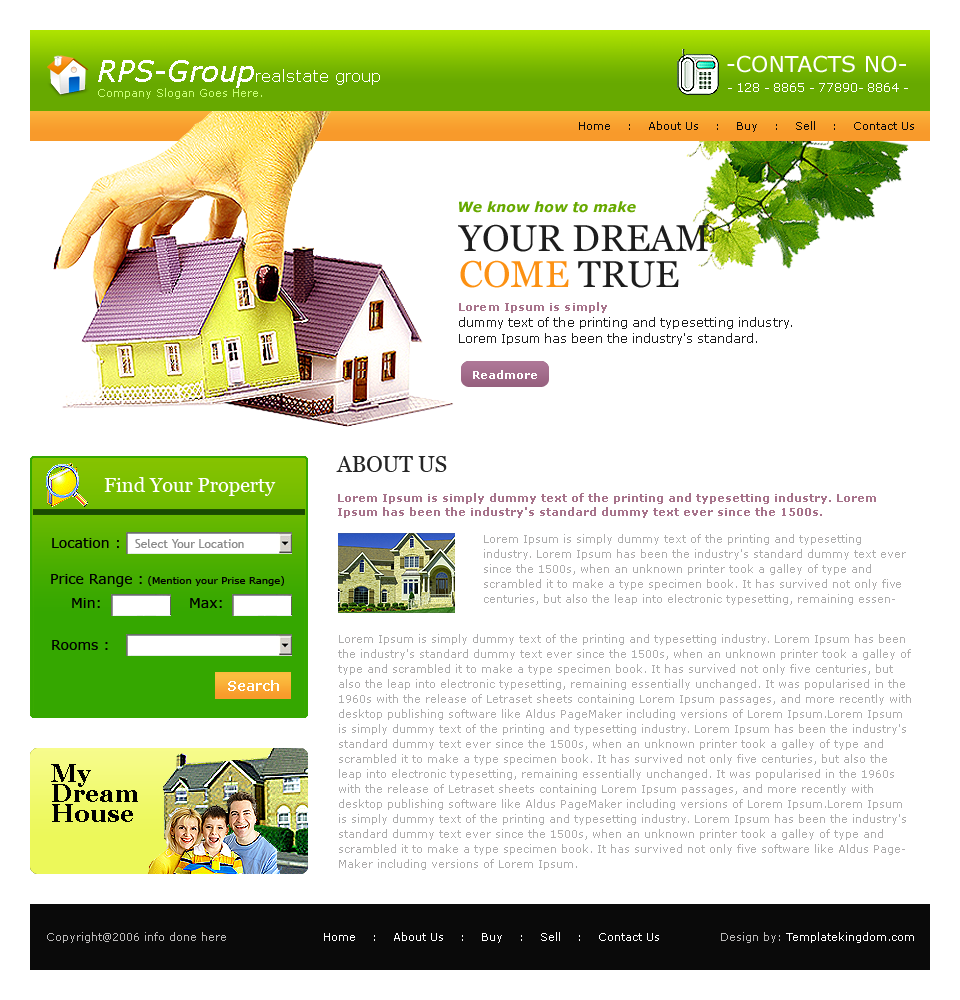
<style>
.page{position:relative;width:960px;height:1000px;background:#ffffff}
.page>*{position:absolute;margin:0}
.t1{font:16px "Verdana";color:#ffffff}
.t2{font:29px "Verdana-Italic";color:#ffffff}
.t3{font:22px "Verdana";color:#ffffff}
.t4{font:11px "Verdana";color:#caff77}
.t5{font:12px "Verdana";color:#ffffff}
.t6{font:11px "Verdana";color:#0a0a0a}
.t7{font:14px "Verdana-BoldItalic";color:#67a900}
.t8{font:37px/36px "Georgia";color:#1d1d1d}
.t9{font:37px/36px "Georgia";color:#fc9113}
.t10{font:12px/16px "Verdana";color:#1d1d1d}
.t11{font:11px/16px "Verdana-Bold";color:#a7738b}
.t12{font:11px "Verdana-Bold";color:#ffffff}
.t13{font:22px "Georgia";color:#252525;text-transform:uppercase}
.t14{font:20px "Georgia";color:#ffffff}
.t15{font:11px/14px "Verdana-Bold";color:#a7738b}
.t16{font:11px/15px "Verdana";color:#adacac}
.t17{font:14px "Verdana";color:#000000}
.t18{font:12px "TrebuchetMS";color:#8b8b8b}
.t19{font:10px "Verdana";color:#000000}
.t20{font:14px "Verdana-Bold";color:#ffffff}
.t21{font:25px/20px "Georgia-Bold";color:#000000}
.t22{font:11px "Verdana";color:#bab9b9}
.t23{font:11px "Verdana";color:#ffffff}
</style>
<div class="page">
<p class="t1" style="left:98px;top:60px;width:282px;height:28px"><span class="t2">RPS-Group</span>realstate group</p>
<p class="t3" style="left:727px;top:55px;width:179px;height:18px">-CONTACTS NO-</p>
<p class="t4" style="left:98px;top:88px;width:164px;height:11px">Company Slogan Goes Here.</p>
<p class="t5" style="left:728px;top:83px;width:180px;height:9px">- 128 - 8865 - 77890- 8864 -</p>
<p class="t6" style="left:579px;top:121px;width:335px;height:11px">Home    :    About Us    :    Buy    :    Sell    :    Contact Us</p>
<p class="t7" style="left:459px;top:201px;width:177px;height:12px">We know how to make</p>
<p class="t8" style="left:458px;top:224px;width:250px;height:64px">YOUR DREAM<br><span class="t9">COME</span> TRUE</p>
<p class="t10" style="left:459px;top:302px;width:333px;height:43px"><span class="t11">Lorem Ipsum is simply <br></span>dummy text of the printing and typesetting industry. Lorem Ipsum has been the industry's standard.</p>
<p class="t12" style="left:473px;top:370px;width:64px;height:9px">Readmore</p>
<p class="t13" style="left:336px;top:456px;width:111px;height:16px">about us</p>
<p class="t14" style="left:104px;top:477px;width:172px;height:19px">Find Your Property</p>
<p class="t15" style="left:338px;top:493px;width:538px;height:25px">Lorem Ipsum is simply dummy text of the printing and typesetting industry. Lorem Ipsum has been the industry's standard dummy text ever since the 1500s.</p>
<p class="t16" style="left:484px;top:534px;width:422px;height:71px">Lorem Ipsum is simply dummy text of the printing and typesetting industry. Lorem Ipsum has been the industry's standard dummy text ever since the 1500s, when an unknown printer took a galley of type and scrambled it to make a type specimen book. It has survived not only five centuries, but also the leap into electronic typesetting, remaining essentially unchanged. It was popularised in the 1960s with the release of Letraset sheets containing Lorem Ipsum passages, and more recently with desktop publishing software like Aldus PageMaker including versions of Lorem Ipsum.</p>
<p class="t17" style="left:52px;top:538px;width:67px;height:10px">Location :</p>
<p class="t18" style="left:135px;top:539px;width:109px;height:9px">Select Your Location</p>
<p class="t19" style="left:51px;top:574px;width:233px;height:13px"><span class="t17">Price Range :</span> (Mention your Prise Range)</p>
<p class="t17" style="left:72px;top:598px;width:28px;height:10px">Min:</p>
<p class="t17" style="left:190px;top:598px;width:32px;height:10px">Max:</p>
<p class="t17" style="left:52px;top:640px;width:56px;height:10px">Rooms :</p>
<p class="t16" style="left:338px;top:634px;width:573px;height:236px">Lorem Ipsum is simply dummy text of the printing and typesetting industry. Lorem Ipsum has been the industry's standard dummy text ever since the 1500s, when an unknown printer took a galley of type and scrambled it to make a type specimen book. It has survived not only five centuries, but also the leap into electronic typesetting, remaining essentially unchanged. It was popularised in the 1960s with the release of Letraset sheets containing Lorem Ipsum passages, and more recently with desktop publishing software like Aldus PageMaker including versions of Lorem Ipsum.Lorem Ipsum is simply dummy text of the printing and typesetting industry. Lorem Ipsum has been the industry's standard dummy text ever since the 1500s, when an unknown printer took a galley of type and scrambled it to make a type specimen book. It has survived not only five centuries, but also the leap into electronic typesetting, remaining essentially unchanged. It was popularised in the 1960s with the release of Letraset sheets containing Lorem Ipsum passages, and more recently with desktop publishing software like Aldus PageMaker including versions of Lorem Ipsum.Lorem Ipsum is simply dummy text of the printing and typesetting industry. Lorem Ipsum has been the industry's standard dummy text ever since the 1500s, when an unknown printer took a galley of type and scrambled it to make a type specimen book. It has survived not only five software like Aldus PageMaker including versions of Lorem Ipsum.</p>
<p class="t20" style="left:228px;top:680px;width:51px;height:11px">Search</p>
<p class="t21" style="left:51px;top:764px;width:87px;height:58px">My<br>Dream<br>House</p>
<p class="t22" style="left:47px;top:932px;width:179px;height:11px">Copyright@2006 info done here</p>
<p class="t23" style="left:324px;top:932px;width:335px;height:11px">Home    :    About Us    :    Buy    :    Sell    :    Contact Us</p>
<p class="t23" style="left:721px;top:932px;width:193px;height:11px"><span class="t22">Design by:</span> Templatekingdom.com</p>
</div>
